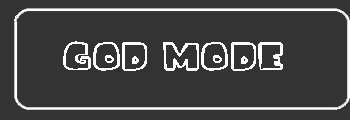
<style>
.page{position:relative;width:350px;height:120px;background:#333333}
.page>*{position:absolute;margin:0}
.t1{font:60px "iceagefont";color:#ffffff}
</style>
<div class="page">
<p class="t1" style="left:63px;top:41px;width:220px;height:30px">God Mode</p>
</div>
